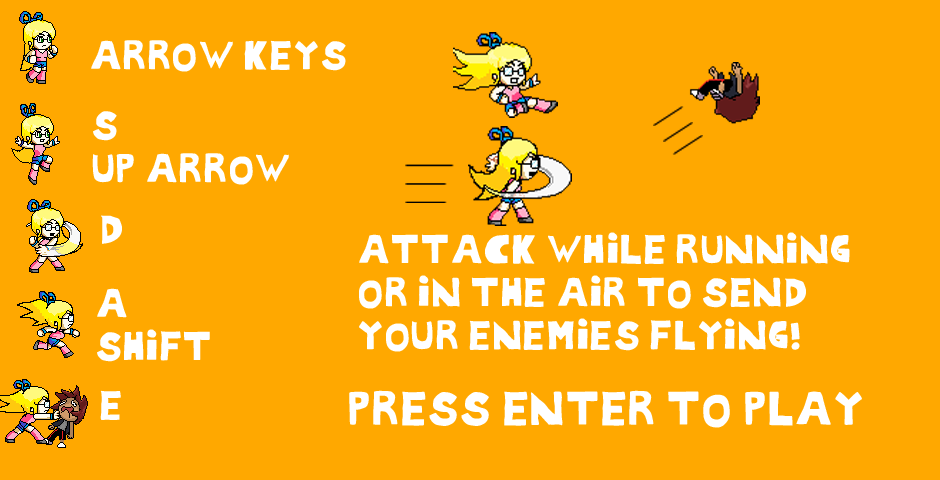
<style>
.page{position:relative;width:940px;height:480px;background:#ffa800}
.page>*{position:absolute;margin:0}
.t1{font:36px "StolenStreet-Regular";color:#ffffff}
.t2{font:42px "StolenStreet-Regular";color:#ffffff}
</style>
<div class="page">
<p class="t1" style="left:91px;top:40px;width:255px;height:32px">ARROW KEYS</p>
<p class="t1" style="left:92px;top:111px;width:197px;height:74px">S<br>UP ARROW</p>
<p class="t1" style="left:101px;top:215px;width:21px;height:29px">D</p>
<p class="t1" style="left:359px;top:232px;width:491px;height:120px">ATTACK WHILE RUNNING OR IN THE AIR TO SEND YOUR ENEMIES FLYING!</p>
<p class="t1" style="left:97px;top:288px;width:113px;height:74px">A <br>SHIFT</p>
<p class="t1" style="left:100px;top:390px;width:21px;height:30px">E</p>
<p class="t2" style="left:349px;top:390px;width:513px;height:38px">PRESS ENTER TO PLAY</p>
</div>
